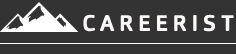
<style>
.page{position:relative;width:236px;height:54px;background:#333333}
.page>*{position:absolute;margin:0}
.t1{font:22px "Orgon-Bold";color:#fdf9f9}
</style>
<div class="page">
<p class="t1" style="left:83px;top:14px;width:151px;height:18px">C A R E E R I S T</p>
</div>
